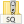
<style>
.page{position:relative;width:24px;height:24px;background:#ffffff}
.page>*{position:absolute;margin:0}
.t1{font:7px "SegoeUI";color:#61605c}
</style>
<div class="page">
<p class="t1" style="left:6px;top:16px;width:10px;height:7px">SQ</p>
</div>
